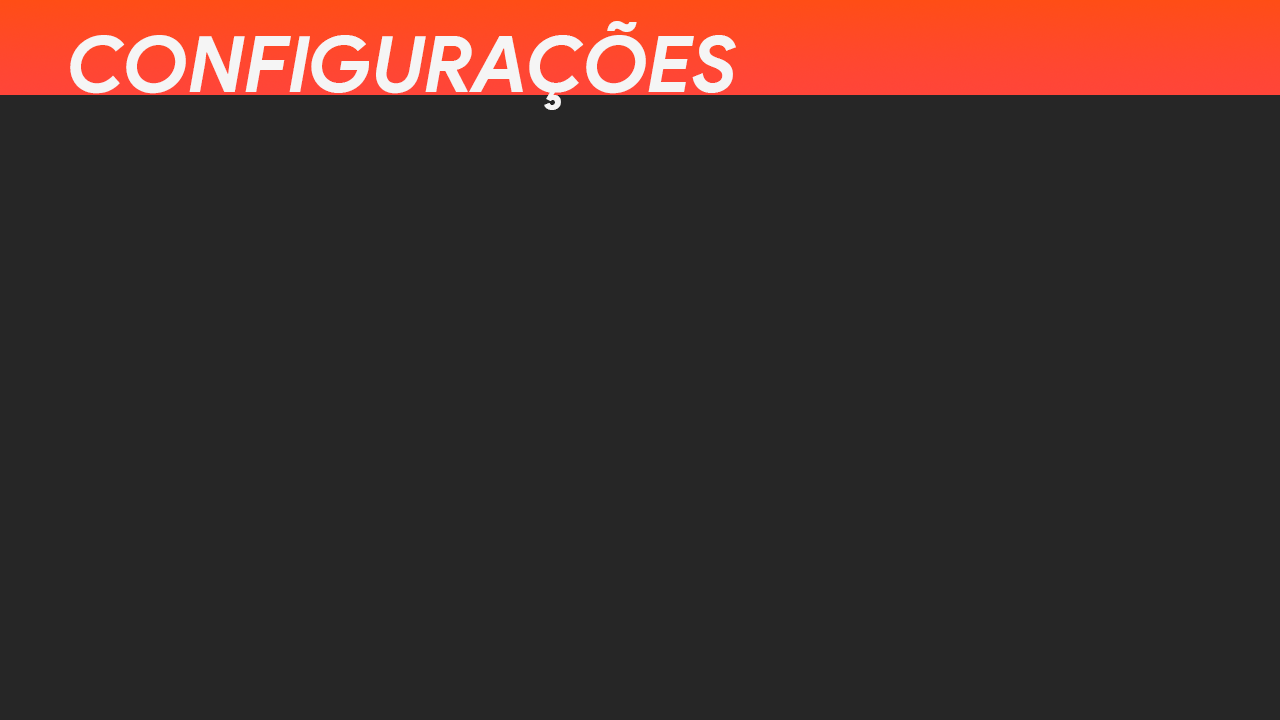
<style>
.page{position:relative;width:1280px;height:720px;background:#262626}
.page>*{position:absolute;margin:0}
.t1{font:78px "ProductSans-BoldItalic";color:#f5f5f5}
</style>
<div class="page">
<p class="t1" style="left:70px;top:21px;width:666px;height:89px">CONFIGURAÇÕES</p>
</div>
